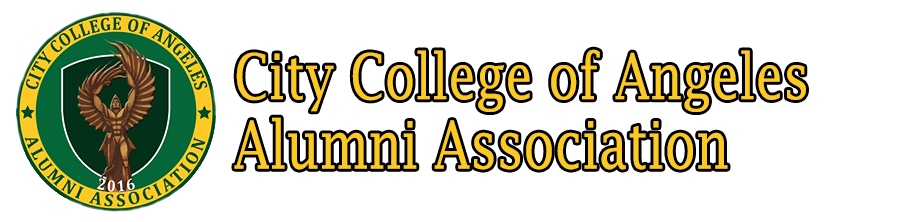
<style>
.page{position:relative;width:920px;height:222px;background:#ffffff}
.page>*{position:absolute;margin:0}
.t1{font:62.8px "LucidaFax";color:#fbc926;scale:0.78 1}
.t2{font:65.6px "LucidaFax";color:#fbc926;scale:0.77 1}
</style>
<div class="page">
<p class="t1" style="left:236px;top:49px;width:570px;height:63px">City College of Angeles</p>
<p class="t2" style="left:234px;top:117px;width:494px;height:53px">Alumni Association</p>
</div>
